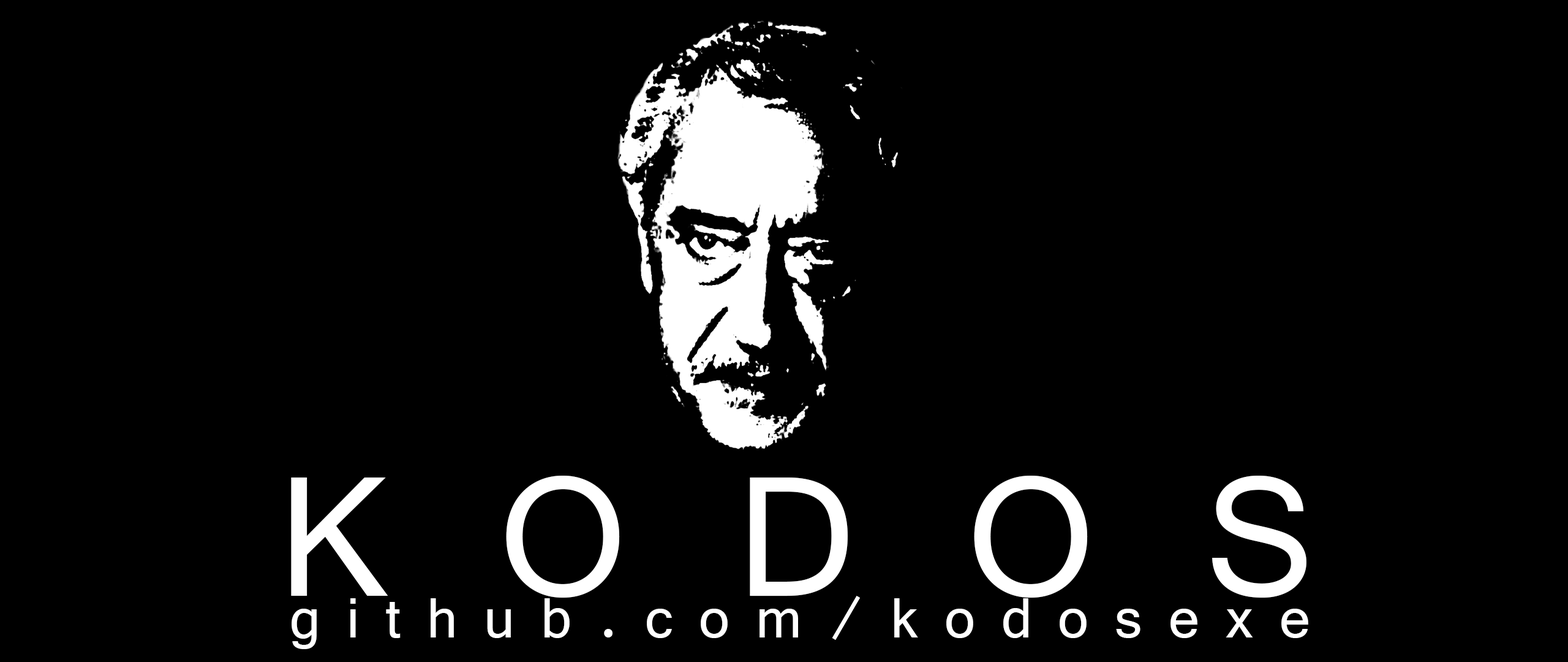
<style>
.page{position:relative;width:1568px;height:662px;background:#000000}
.page>*{position:absolute;margin:0}
.t1{font:183.8px "Vrinda";letter-spacing:0.6em;color:#ffffff}
.t2{font:61.3px "Vrinda";letter-spacing:0.43em;color:#ffffff}
</style>
<div class="page">
<p class="t1" style="left:291px;top:475px;width:1015px;height:122px">KODOS</p>
<p class="t2" style="left:292px;top:595px;width:1016px;height:54px">github.com/kodosexe</p>
</div>
